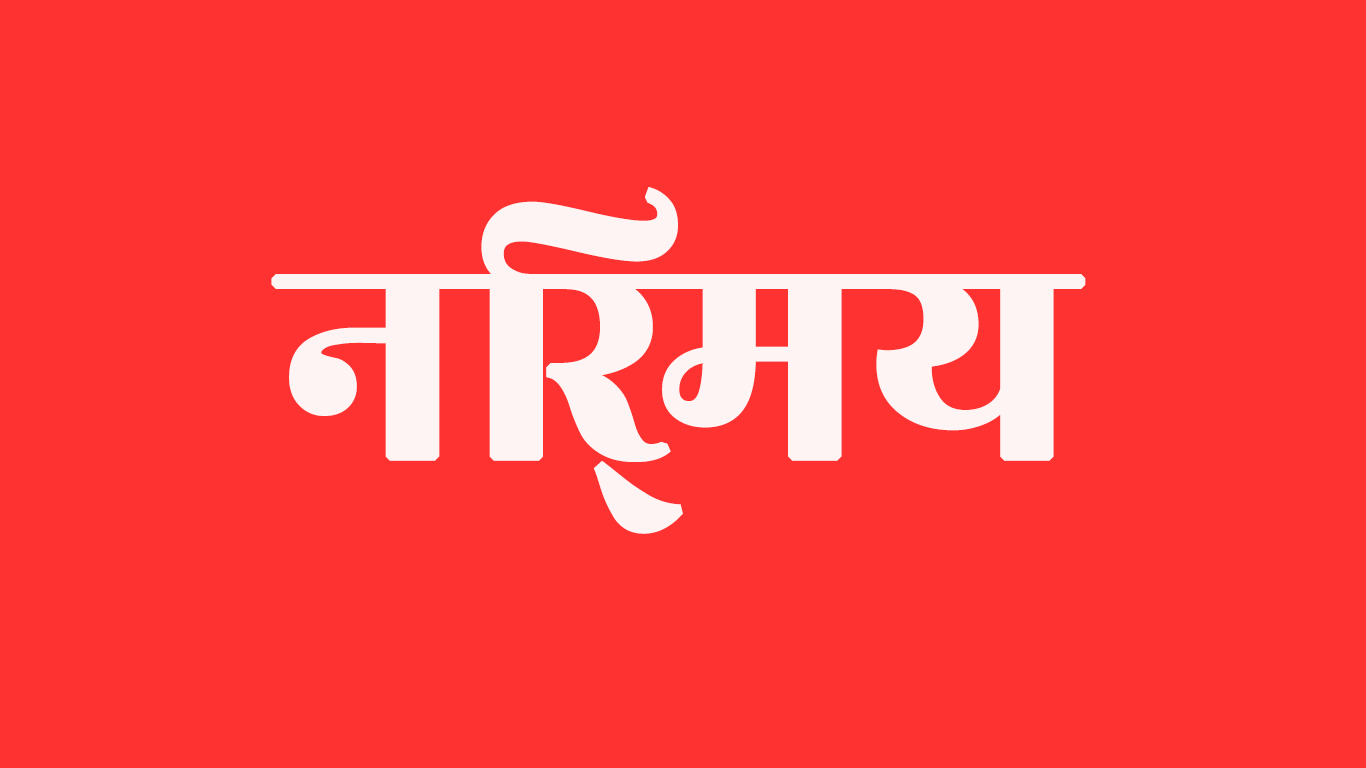
<style>
.page{position:relative;width:1366px;height:768px;background:#ff3232}
.page>*{position:absolute;margin:0}
.t1{font:318px "RozhaOne-Regular";color:#ffffff;font-weight:bold}
.t2{font:318px "RozhaOne-Regular";letter-spacing:-0.08em;color:#ffffff;font-weight:bold}
</style>
<div class="page">
<p class="t1" style="left:271px;top:187px;width:815px;height:347px">न<span class="t2">िर</span>्मय</p>
</div>
